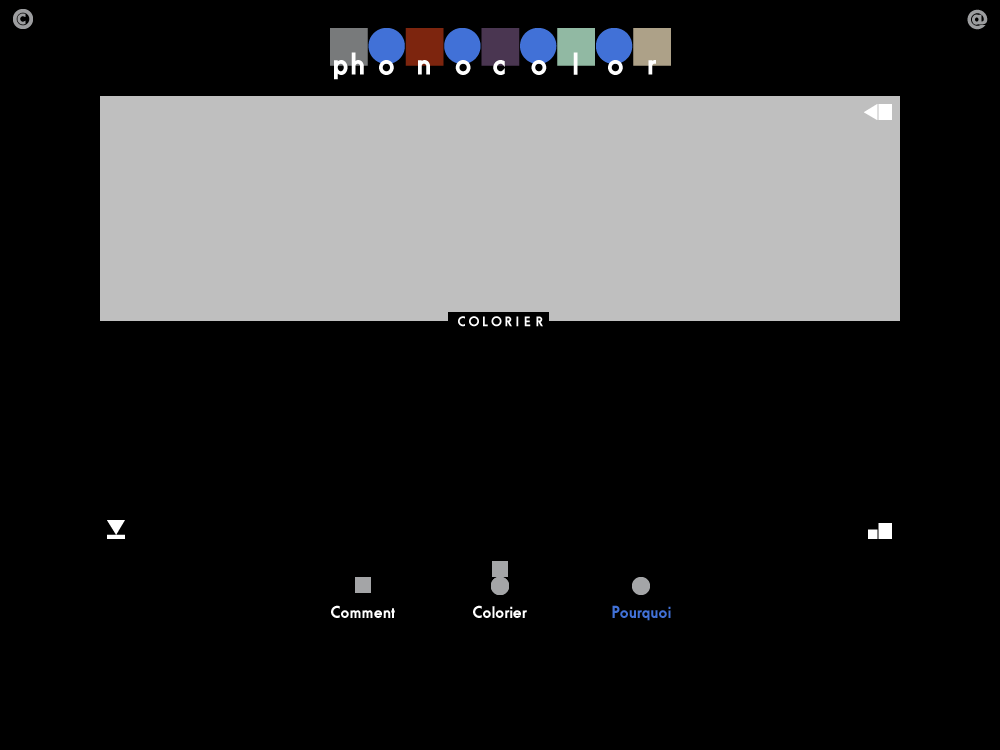
<style>
.page{position:relative;width:1000px;height:750px;background:#000000}
.page>*{position:absolute;margin:0}
.t1{font:17px "FundamentalBrigadeSchwer";letter-spacing:0.03em;color:#ffffff}
.t2{font:17px "FundamentalBrigadeSchwer";letter-spacing:0.03em;color:#4171d7}
</style>
<div class="page">
<p class="t1" style="left:331px;top:605px;width:64px;height:13px">Comment</p>
<p class="t1" style="left:473px;top:605px;width:54px;height:13px">Colorier</p>
<p class="t2" style="left:612px;top:605px;width:59px;height:16px">Pourquoi</p>
</div>
